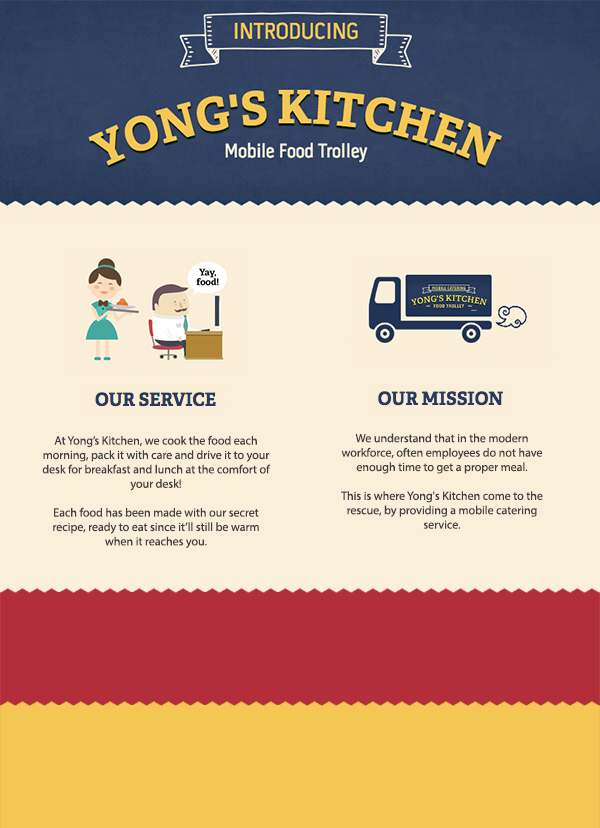
<style>
.page{position:relative;width:600px;height:828px;background:#faefd8}
.page>*{position:absolute;margin:0}
.t1{font:12px "MyriadPro-Regular";color:#414042}
</style>
<div class="page">
<p class="t1" style="left:42px;top:435px;width:229px;height:113px;text-align:center">At Yong’s Kitchen, we cook the food each morning, pack it with care and drive it to your desk for breakfast and lunch at the comfort of your desk!<br><br>Each food has been made with our secret recipe, ready to eat since it’ll still be warm when it reaches you.</p>
<p class="t1" style="left:341px;top:433px;width:202px;height:96px;text-align:center">We understand that in the modern workforce, often employees do not have enough time to get a proper meal.<br><br>This is where Yong's Kitchen come to the rescue, by providing a mobile catering service.</p>
</div>
